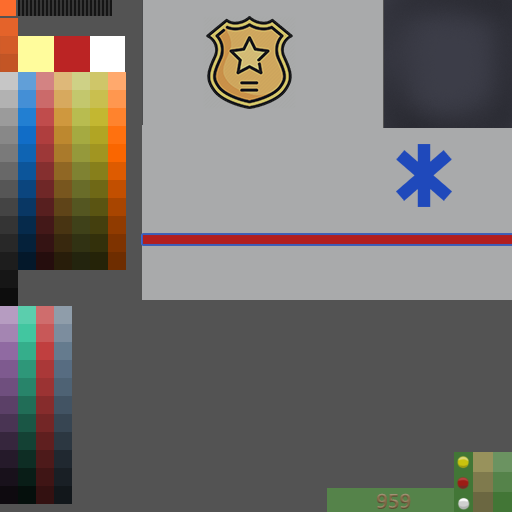
<style>
.page{position:relative;width:512px;height:512px;background:#535353}
.page>*{position:absolute;margin:0}
.t1{font:23px "Calibri-Bold";color:#836e4a}
</style>
<div class="page">
<p class="t1" style="left:376px;top:493px;width:35px;height:16px">959</p>
</div>
